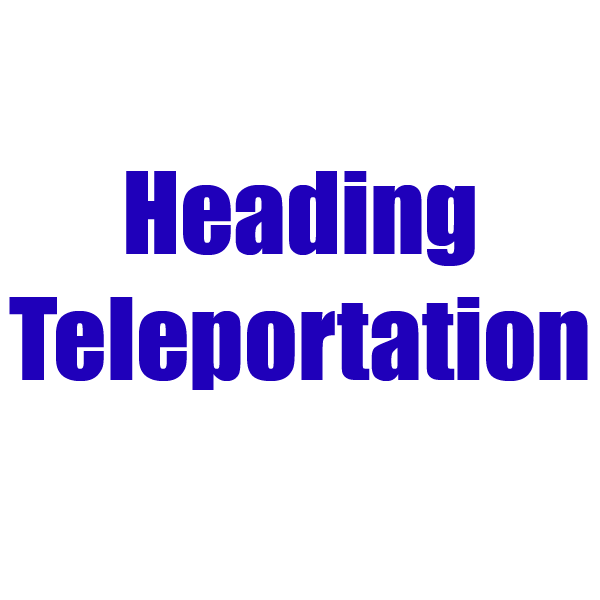
<style>
.page{position:relative;width:600px;height:600px;background:#ffffff}
.page>*{position:absolute;margin:0}
.t1{font:104.9px "Impact";color:#1f00ba}
</style>
<div class="page">
<p class="t1" style="left:9px;top:171px;width:579px;height:219px;text-align:center">Heading<br>Teleportation</p>
</div>
